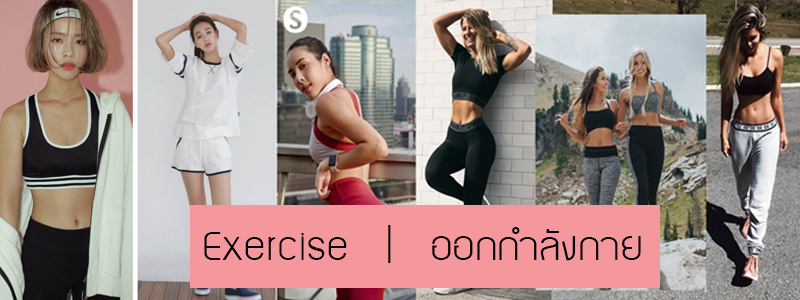
<style>
.page{position:relative;width:800px;height:300px}
.page>*{position:absolute;margin:0}
.t1{font:56.5px "MAXPINJOHNV2";color:#000000;scale:0.97 1}
.t2{font:64.7px "MAXPINJOHNV2";color:#000000;scale:0.97 1}
</style>
<div class="page">
<p class="t1" style="left:204px;top:225px;width:437px;height:38px"><span class="t2">Exercise</span>  |  ออกกำลังกาย</p>
</div>
